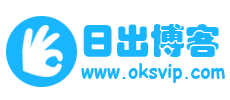
<style>
.page{position:relative;width:230px;height:100px;background:#ffffff}
.page>*{position:absolute;margin:0}
.t1{font:35px "STHupo";color:#19b5fe}
.t2{font:19px "ComicSansMS-Bold";color:#19b5fe}
</style>
<div class="page">
<p class="t1" style="left:83px;top:24px;width:136px;height:33px">日出博客</p>
<p class="t2" style="left:81px;top:63px;width:144px;height:20px">www.oksvip.com</p>
</div>
